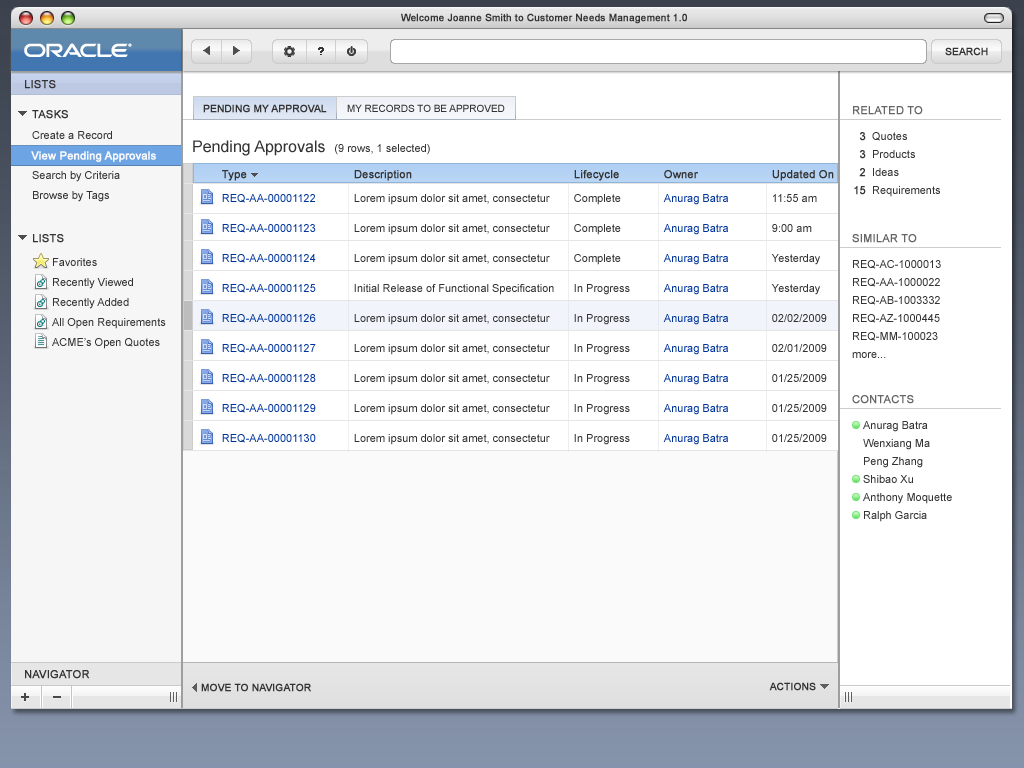
<style>
.page{position:relative;width:1024px;height:768px;background:#ffffff}
.page>*{position:absolute;margin:0}
.t1{font:11px "ArialMT";color:#333333;text-transform:uppercase;font-weight:bold}
.t2{font:10px "ArialMT";color:#333333;text-transform:uppercase;font-weight:bold}
.t3{font:10px "ArialMT";color:#333333;text-transform:uppercase}
.t4{font:11px "ArialMT";color:#666666;text-transform:uppercase;font-weight:bold}
.t5{font:11px "ArialMT";color:#666666;font-weight:bold}
.t6{font:11px/20px "ArialMT";color:#333333}
.t7{font:11px/18px "ArialMT";color:#333333;font-weight:bold}
.t8{font:11px/18px "ArialMT";color:#333333}
.t9{font:11px "ArialMT";color:#333333}
.t10{font:16px "ArialMT";color:#333333}
.t11{font:11px "ArialMT";color:#fafafd;font-weight:bold}
.t12{font:11px/10px "ArialMT";color:#003399}
.t13{font:11px "ArialMT";color:#333333;font-weight:bold}
.t14{font:11px/14px "ArialMT";color:#003399}
.t15{font:11px/10px "ArialMT";color:#333333}
.t16{font:11px/8px "ArialMT";color:#333333;font-weight:bold}
.t17{font:11px/14px "ArialMT";color:#333333}
</style>
<div class="page">
<p class="t1" style="left:32px;top:110px;width:36px;height:9px">Tasks</p>
<p class="t2" style="left:203px;top:104px;width:124px;height:9px">Pending my approval</p>
<p class="t3" style="left:347px;top:104px;width:158px;height:8px">My records to be approved</p>
<p class="t4" style="left:853px;top:106px;width:70px;height:9px"><span class="t5">R</span>elated To</p>
<p class="t6" style="left:32px;top:131px;width:118px;height:71px">Create a Record<br>View Pending Approvals<br>Search by Criteria<br>Browse by Tags</p>
<p class="t7" style="left:854px;top:132px;width:12px;height:63px;text-align:right">3<br>3<br>2<br>15</p>
<p class="t8" style="left:872px;top:132px;width:68px;height:65px">Quotes<br>Products<br>Ideas<br>Requirements</p>
<p class="t9" style="left:193px;top:140px;width:237px;height:16px"><span class="t10">Pending Approvals  </span>(9 rows, 1 selected)</p>
<p class="t11" style="left:31px;top:151px;width:125px;height:11px">View Pending Approvals</p>
<p class="t12" style="left:222px;top:170px;width:94px;height:273px"><span class="t13">Type<br><br></span><span class="t14">REQ-AA-00001122<br></span><br><br>REQ-AA-00001123<br><br><br>REQ-AA-00001124<br><br><br>REQ-AA-00001125<br><br> <br>REQ-AA-00001126<br><br><br>REQ-AA-00001127<br><br><br>REQ-AA-00001128<br><br><br>REQ-AA-00001129<br><br><br>REQ-AA-00001130</p>
<p class="t15" style="left:354px;top:170px;width:200px;height:275px"><span class="t13">De</span><span class="t16">scription<br><br></span><span class="t17">Lorem ipsum dolor sit amet, consectetur <br></span><br><br>Lorem ipsum dolor sit amet, consectetur <br><br><br>Lorem ipsum dolor sit amet, consectetur <br><br><br>Initial Release of Functional Specification<br><br><br>Lorem ipsum dolor sit amet, consectetur<br><br><br>Lorem ipsum dolor sit amet, consectetur <br><br><br>Lorem ipsum dolor sit amet, consectetur <br><br><br>Lorem ipsum dolor sit amet, consectetur <br><br><br>Lorem ipsum dolor sit amet, consectetur</p>
<p class="t15" style="left:574px;top:170px;width:56px;height:275px"><span class="t13">Lifecycle<br><br></span><span class="t17">Complete<br></span><br><br>Complete<br><br><br>Complete<br><br><br>In Progress<br><br><br>In Progress<br><br><br>In Progress<br><br><br>In Progress <br><br><br>In Progress<br><br><br>In Progress</p>
<p class="t12" style="left:663px;top:170px;width:65px;height:275px"><span class="t13">Owner<br><br></span><span class="t14">Anurag Batra<br></span><br><br>Anurag Batra<br><br><br>Anurag Batra<br><br><br>Anurag Batra<br><br><br>Anurag Batra<br><br><br>Anurag Batra<br><br><br>Anurag Batra<br><br><br>Anurag Batra<br><br><br>Anurag Batra</p>
<p class="t15" style="left:771px;top:170px;width:63px;height:272px"><span class="t13">Updated On<br><br></span><span class="t17">11:55 am<br></span><br><br>9:00 am<br><br><br>Yesterday<br><br><br>Yesterday<br><br><br>02/02/2009<br><br><br>02/01/2009<br><br><br>01/25/2009<br><br><br>01/25/2009<br><br><br>01/25/2009</p>
<p class="t1" style="left:33px;top:234px;width:31px;height:9px">lists</p>
<p class="t4" style="left:852px;top:234px;width:65px;height:9px"><span class="t5">S</span>IMILAR TO</p>
<p class="t6" style="left:52px;top:258px;width:114px;height:91px">Favorites<br>Recently Viewed<br>Recently Added<br>All Open Requirements<br>ACME’s Open Quotes</p>
<p class="t8" style="left:852px;top:260px;width:89px;height:98px">REQ-AC-1000013<br>REQ-AA-1000022<br>REQ-AB-1003332<br>REQ-AZ-1000445<br>REQ-MM-100023<br>more...</p>
<p class="t4" style="left:852px;top:395px;width:62px;height:9px">contacts</p>
<p class="t8" style="left:863px;top:421px;width:89px;height:101px">Anurag Batra<br>Wenxiang Ma<br>Peng Zhang<br>Shibao Xu<br>Anthony Moquette<br>Ralph Garcia</p>
<p class="t2" style="left:201px;top:683px;width:110px;height:9px">Move to Navigator</p>
<p class="t2" style="left:769px;top:682px;width:47px;height:9px">actions</p>
</div>
